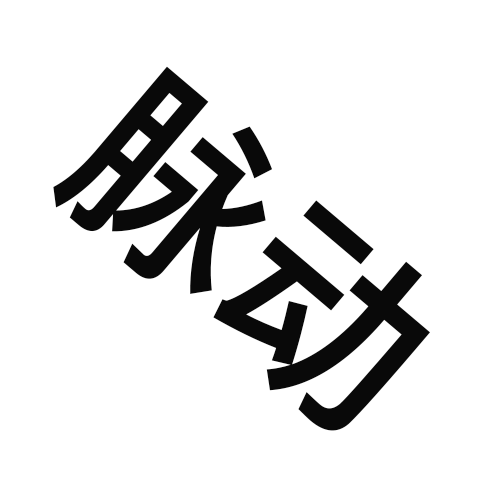
<style>
.page{position:relative;width:500px;height:500px;background:#ffffff}
.page>*{position:absolute;margin:0}
.t1{font:200px "PingFangSC-Semibold";color:#090909}
</style>
<div class="page">
<p class="t1" style="left:53px;top:66px;width:377px;height:365px;rotate:40deg">脉动</p>
</div>
